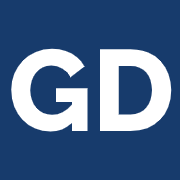
<style>
.page{position:relative;width:180px;height:180px;background:#173b6c}
.page>*{position:absolute;margin:0}
.t1{font:115px "Raleway-ExtraBold";color:#ffffff}
</style>
<div class="page">
<p class="t1" style="left:11px;top:48px;width:161px;height:84px">GD</p>
</div>
